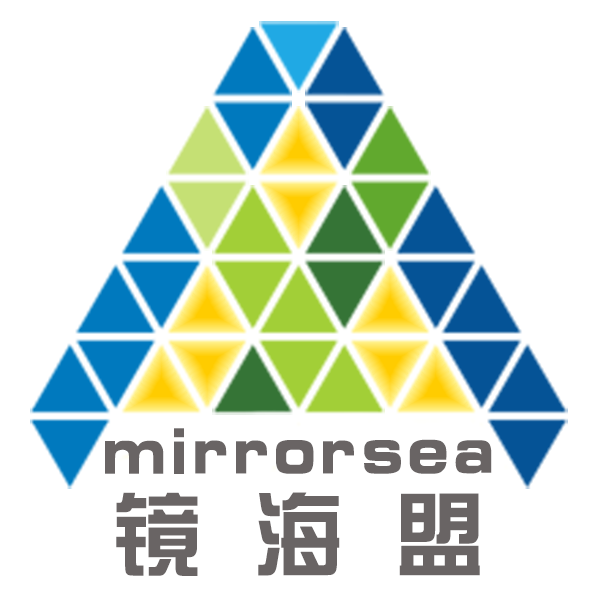
<style>
.page{position:relative;width:600px;height:600px;background:#ffffff}
.page>*{position:absolute;margin:0}
.t1{font:68.2px "ç»å¸ç»¼èºä½ç®-regular";color:#696464;font-weight:bold}
.t2{font:90.9px "ç»å¸ç»¼èºä½ç®-regular";color:#696464;font-weight:bold}
</style>
<div class="page">
<p class="t1" style="left:105px;top:428px;width:387px;height:46px">mirrorsea</p>
<p class="t2" style="left:116px;top:492px;width:364px;height:84px">镜 海 盟</p>
</div>
